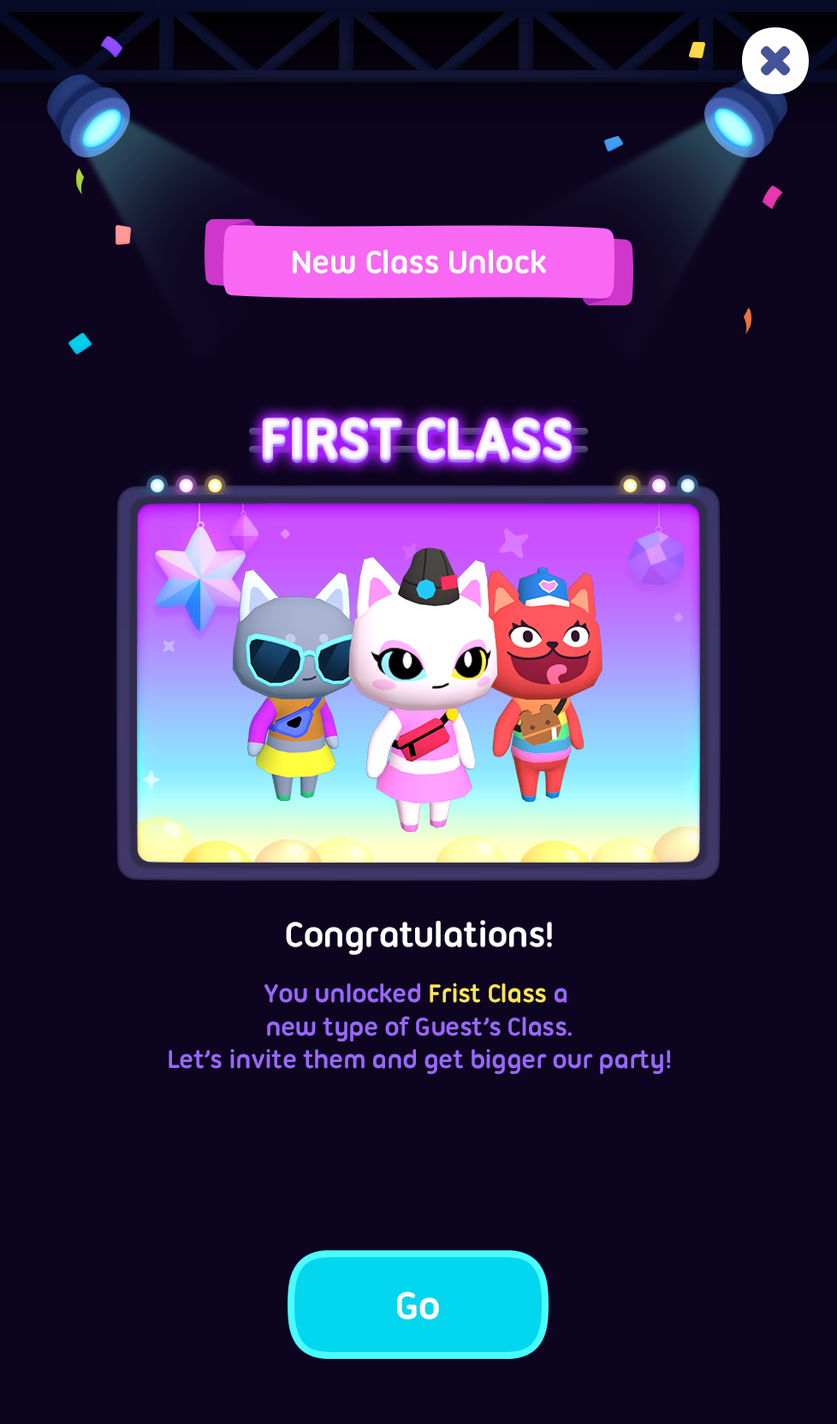
<style>
.page{position:relative;width:837px;height:1424px;background:#0d0420}
.page>*{position:absolute;margin:0}
.t1{font:34.2px "UbuntuTitling-Bold";letter-spacing:-0.025em;color:#ffffff}
.t2{font:59.9px "UbuntuTitling-Bold";letter-spacing:-0.04em;color:#f8f2ff;text-transform:uppercase;font-weight:bold}
.t3{font:59.9px "UbuntuTitling-Bold";letter-spacing:-0.04em;color:#ffffff;text-transform:uppercase;font-weight:bold}
.t4{font:37.7px "UbuntuTitling-Bold";letter-spacing:-0.025em;color:#ffffff}
.t5{font:27.4px "UbuntuTitling-Bold";letter-spacing:-0.025em;color:#9967ff}
.t6{font:27.4px "UbuntuTitling-Bold";letter-spacing:-0.025em;color:#ffe552}
.t7{font:41.1px "UbuntuTitling-Bold";letter-spacing:-0.025em;color:#ffffff}
</style>
<div class="page">
<p class="t1" style="left:293px;top:249px;width:253px;height:25px">New Class Unlock</p>
<p class="t2" style="left:263px;top:420px;width:308px;height:42px">First Class</p>
<p class="t3" style="left:263px;top:418px;width:308px;height:42px">First Class</p>
<p class="t4" style="left:286px;top:920px;width:266px;height:35px">Congratulations!</p>
<p class="t5" style="left:169px;top:984px;width:501px;height:90px;text-align:center">You unlocked <span class="t6">Frist Class </span>a <br>new type of Guest’s Class.<br>Let’s invite them and get bigger our party!</p>
<p class="t7" style="left:397px;top:1292px;width:42px;height:28px">Go</p>
</div>
